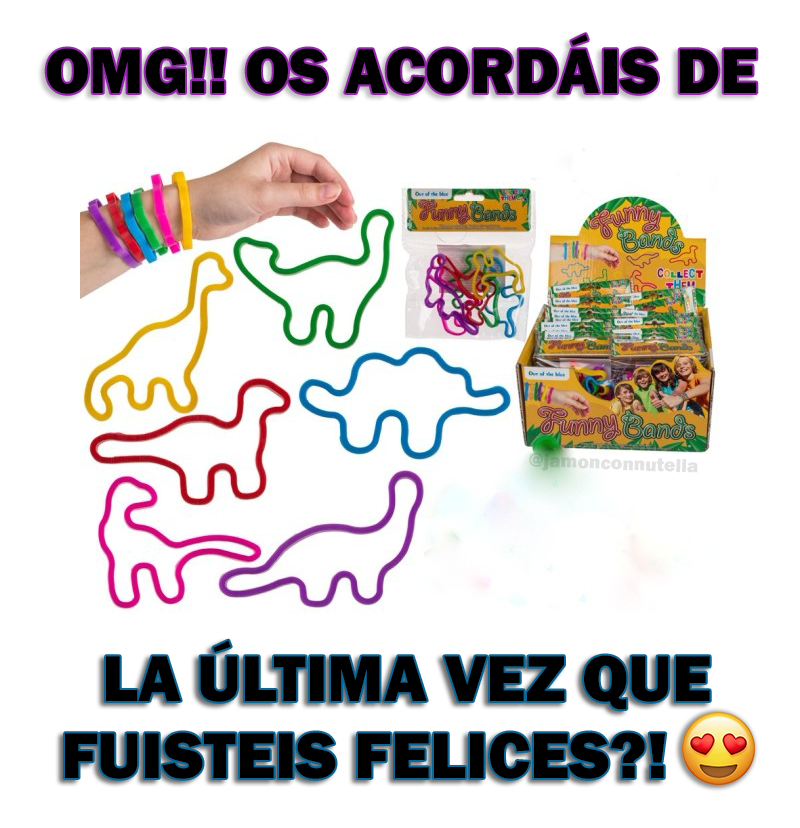
<style>
.page{position:relative;width:800px;height:828px;background:#ffffff}
.page>*{position:absolute;margin:0}
.t1{font:65.7px "FranklinGothic-Heavy";color:#000000}
.t2{font:19.5px "FranklinGothic-Heavy";color:#e2e2e2}
.t3{font:67.2px "FranklinGothic-Heavy";color:#000000}
</style>
<div class="page">
<p class="t1" style="left:46px;top:34px;width:711px;height:60px">OMG!! OS ACORDÁIS DE</p>
<p class="t2" style="left:529px;top:453px;width:169px;height:20px;rotate:2deg">@jamonconnutella</p>
<p class="t3" style="left:65px;top:640px;width:645px;height:139px;text-align:center">LA ÚLTIMA VEZ QUE<br>FUISTEIS FELICES?!</p>
</div>
